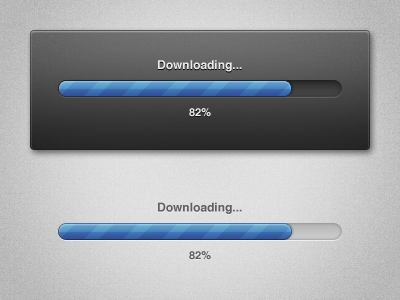
<style>
.page{position:relative;width:400px;height:300px}
.page>*{position:absolute;margin:0}
.t1{font:12px "Helvetica-Bold";color:#eaeaea}
.t2{font:11px "Helvetica-Bold";color:#eaeaea}
.t3{font:12px "Helvetica-Bold";color:#5e5e5e}
.t4{font:11px "Helvetica-Bold";color:#5e5e5e}
</style>
<div class="page">
<p class="t1" style="left:158px;top:60px;width:84px;height:12px">Downloading...</p>
<p class="t2" style="left:189px;top:108px;width:22px;height:9px">82%</p>
<p class="t3" style="left:158px;top:202px;width:84px;height:12px">Downloading...</p>
<p class="t4" style="left:189px;top:251px;width:22px;height:9px">82%</p>
</div>
